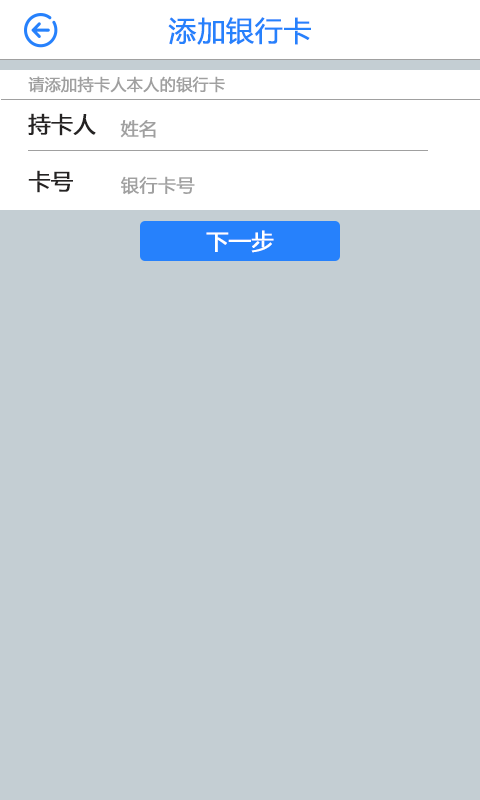
<style>
.page{position:relative;width:480px;height:800px;background:#c4ced3}
.page>*{position:absolute;margin:0}
.t1{font:28px "MicrosoftYaHei";color:#2681fc;font-weight:bold}
.t2{font:16px "MicrosoftYaHei";color:#a0a0a0;font-weight:bold}
.t3{font:22px "MicrosoftYaHei";color:#252323;font-weight:bold}
.t4{font:18px "MicrosoftYaHei";color:#a0a0a0;font-weight:bold}
.t5{font:22px "MicrosoftYaHei";color:#ffffff;font-weight:bold}
</style>
<div class="page">
<p class="t1" style="left:168px;top:17px;width:143px;height:28px">添加银行卡</p>
<p class="t2" style="left:28px;top:76px;width:197px;height:17px">请添加持卡人本人的银行卡</p>
<p class="t3" style="left:28px;top:113px;width:68px;height:23px">持卡人</p>
<p class="t4" style="left:120px;top:120px;width:36px;height:18px">姓名</p>
<p class="t3" style="left:28px;top:170px;width:45px;height:23px">卡号</p>
<p class="t4" style="left:121px;top:176px;width:74px;height:19px">银行卡号</p>
<p class="t5" style="left:206px;top:230px;width:68px;height:23px">下一步</p>
</div>
